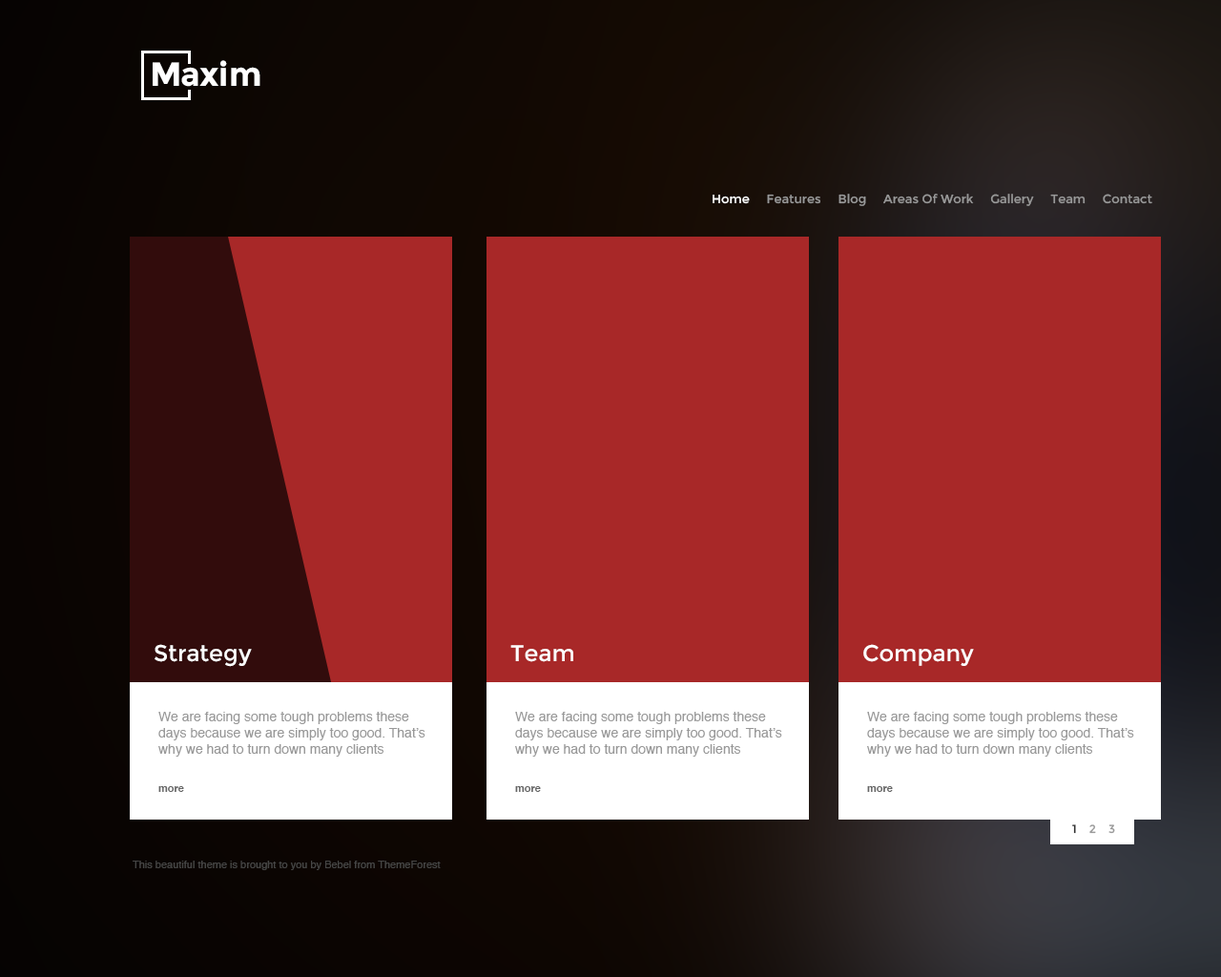
<style>
.page{position:relative;width:1221px;height:977px;background:#a82828}
.page>*{position:absolute;margin:0}
.t1{font:33.4px "Montserrat-Bold";color:#ffffff}
.t2{font:12.4px "Montserrat-Regular";color:#999999}
.t3{font:12.4px "Montserrat-Regular";color:#ffffff}
.t4{font:22.9px "Montserrat-Regular";color:#ffffff}
.t5{font:13.4px/16.2px "Helvetica";color:#999999}
.t6{font:10.5px "Helvetica-Bold";color:#666666}
.t7{font:11.4px "Montserrat-Regular";color:#999999}
.t8{font:11.4px "Montserrat-Regular";color:#323232}
.t9{font:10.5px "Helvetica";color:#454545}
</style>
<div class="page">
<p class="t1" style="left:153px;top:62px;width:26px;height:24px">M</p>
<p class="t1" style="left:199px;top:60px;width:61px;height:26px">xim</p>
<p class="t2" style="left:712px;top:194px;width:440px;height:12px"><span class="t3">Home     </span>Features     Blog     Areas Of Work     Gallery     Team     Contact</p>
<p class="t4" style="left:155px;top:644px;width:97px;height:23px">Strategy</p>
<p class="t4" style="left:510px;top:645px;width:63px;height:17px">Team</p>
<p class="t4" style="left:863px;top:644px;width:111px;height:22px">Company</p>
<p class="t5" style="left:158px;top:712px;width:267px;height:44px">We are facing some tough problems these days because we are simply too good. That’s why we had to turn down many clients</p>
<p class="t5" style="left:515px;top:712px;width:267px;height:44px">We are facing some tough problems these days because we are simply too good. That’s why we had to turn down many clients</p>
<p class="t5" style="left:867px;top:712px;width:267px;height:44px">We are facing some tough problems these days because we are simply too good. That’s why we had to turn down many clients</p>
<p class="t6" style="left:158px;top:786px;width:26px;height:6px">more</p>
<p class="t6" style="left:515px;top:786px;width:26px;height:6px">more</p>
<p class="t6" style="left:867px;top:786px;width:26px;height:6px">more</p>
<p class="t7" style="left:1072px;top:824px;width:43px;height:10px"><span class="t8">1    </span>2    3</p>
<p class="t9" style="left:133px;top:860px;width:308px;height:10px">This beautiful theme is brought to you by Bebel from ThemeForest</p>
</div>
